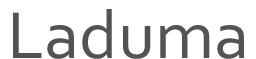
<style>
.page{position:relative;width:256px;height:59px;background:#ffffff}
.page>*{position:absolute;margin:0}
.t1{font:69.2px "Corbel";color:#535353;scale:1.04 1}
</style>
<div class="page">
<p class="t1" style="left:13px;top:9px;width:231px;height:50px">Laduma</p>
</div>
